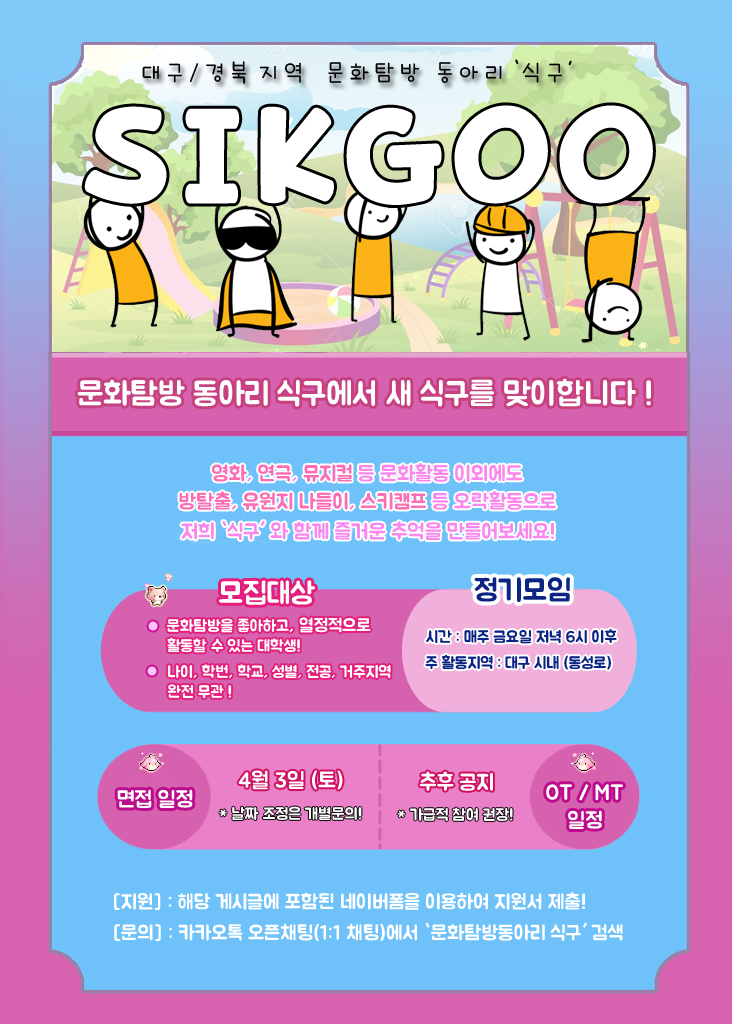
<style>
.page{position:relative;width:732px;height:1024px;background:#6ec2f9}
.page>*{position:absolute;margin:0}
.t1{font:24px "icTTHayanbunpilL";color:#000000}
.t2{font:18px "Pix_BMJUAOTF";color:#000000}
.t3{font:120px "KoreanPODG-R";color:#ffffff}
.t4{font:32px "Pix_BMJUAOTF";color:#ffffff}
.t5{font:21px "Pix_BMJUAOTF";color:#fa87ee}
.t6{font:21px "Pix_BMJUAOTF";color:#fb6db4}
.t7{font:30px "Pix_BMJUAOTF";color:#ffffff}
.t8{font:30px "Pix_BMJUAOTF";color:#0b2483}
.t9{font:16px "Pix_BMJUAOTF";color:#ffffff}
.t10{font:18px "Pix_BMJUAOTF";color:#ffffff}
.t11{font:70px "Pix_BMJUAOTF";color:#ffc5f9}
.t12{font:16px "Pix_BMJUAOTF";color:#0b2483}
.t13{font:22px "Pix_BMJUAOTF";color:#ffffff}
.t14{font:20px "Pix_BMJUAOTF";color:#ffffff}
</style>
<div class="page">
<p class="t1" style="left:142px;top:61px;width:420px;height:23px">대 구 / 경 북  지 역    문 화 탐 방   동 아 리   식 구</p>
<p class="t2" style="left:515px;top:59px;width:4px;height:5px;rotate:6deg">`</p>
<p class="t2" style="left:568px;top:60px;width:4px;height:6px;rotate:173deg">`</p>
<p class="t3" style="left:84px;top:106px;width:83px;height:98px;rotate:-170deg">S</p>
<p class="t3" style="left:185px;top:108px;width:55px;height:96px">I</p>
<p class="t3" style="left:260px;top:106px;width:74px;height:98px">K</p>
<p class="t3" style="left:346px;top:107px;width:96px;height:98px">G</p>
<p class="t3" style="left:454px;top:105px;width:94px;height:99px">O</p>
<p class="t3" style="left:559px;top:105px;width:94px;height:99px">O</p>
<p class="t4" style="left:77px;top:378px;width:574px;height:29px">문화탐방 동아리 식구에서 새 식구를 맞이합니다 !</p>
<p class="t5" style="left:212px;top:463px;width:311px;height:19px"><span class="t6">영화</span>, <span class="t6">연극</span>, <span class="t6">뮤지컬</span> 등 문화활동 이외에도</p>
<p class="t6" style="left:179px;top:491px;width:377px;height:19px">방탈출, 유원지 나들이, 스키캠프<span class="t5"> 등 오락활동으로</span></p>
<p class="t5" style="left:181px;top:521px;width:373px;height:19px">저희 `식구  와 함께 즐거운 추억을 만들어보세요!</p>
<p class="t5" style="left:260px;top:521px;width:5px;height:5px;rotate:180deg">`</p>
<p class="t7" style="left:219px;top:580px;width:96px;height:25px">모집대상</p>
<p class="t8" style="left:474px;top:577px;width:96px;height:25px">정기모임</p>
<p class="t9" style="left:166px;top:617px;width:205px;height:16px">문화탐방을 좋아하고<span class="t10">, 열정적으로</span></p>
<p class="t11" style="left:148px;top:621px;width:10px;height:10px">.</p>
<p class="t12" style="left:426px;top:629px;width:191px;height:15px">시간 : 매주 금요일 저녁 6시 이후</p>
<p class="t9" style="left:167px;top:637px;width:133px;height:16px">활동할 수 있는 대학생!</p>
<p class="t12" style="left:425px;top:654px;width:187px;height:16px">주 활동지역 : 대구 시내 (동성로)</p>
<p class="t9" style="left:167px;top:664px;width:224px;height:15px">나이, 학번, 학교, 성별, 전공, 거주지역</p>
<p class="t11" style="left:147px;top:666px;width:10px;height:10px">.</p>
<p class="t9" style="left:167px;top:684px;width:65px;height:15px">완전 무관 !</p>
<p class="t13" style="left:238px;top:770px;width:105px;height:20px">4월 3일 (토)</p>
<p class="t13" style="left:419px;top:771px;width:74px;height:20px">추후 공지</p>
<p class="t13" style="left:546px;top:784px;width:77px;height:17px">OT / MT</p>
<p class="t13" style="left:117px;top:789px;width:76px;height:19px">면접 일정</p>
<p class="t9" style="left:219px;top:806px;width:143px;height:15px">* 날짜 조정은 개별문의!</p>
<p class="t9" style="left:397px;top:807px;width:116px;height:15px">* 가급적 참여 권장!</p>
<p class="t13" style="left:568px;top:810px;width:34px;height:19px">일정</p>
<p class="t14" style="left:114px;top:892px;width:471px;height:18px">[지원] : 해당 게시글에 포함된 네이버폼을 이용하여 지원서 제출!</p>
<p class="t14" style="left:114px;top:922px;width:509px;height:20px">[문의] : 카카오톡 오픈채팅(1:1 채팅)에서 `문화탐방동아리 식구  검색</p>
<p class="t14" style="left:583px;top:922px;width:4px;height:6px;rotate:180deg">`</p>
</div>
